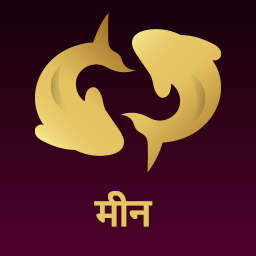
<style>
.page{position:relative;width:256px;height:256px}
.page>*{position:absolute;margin:0}
.t1{font:34.1px "NirmalaUI-Bold";letter-spacing:-0.05em;color:#e6c565;text-transform:uppercase;font-weight:bold}
</style>
<div class="page">
<p class="t1" style="left:94px;top:191px;width:59px;height:36px">मीन</p>
</div>
